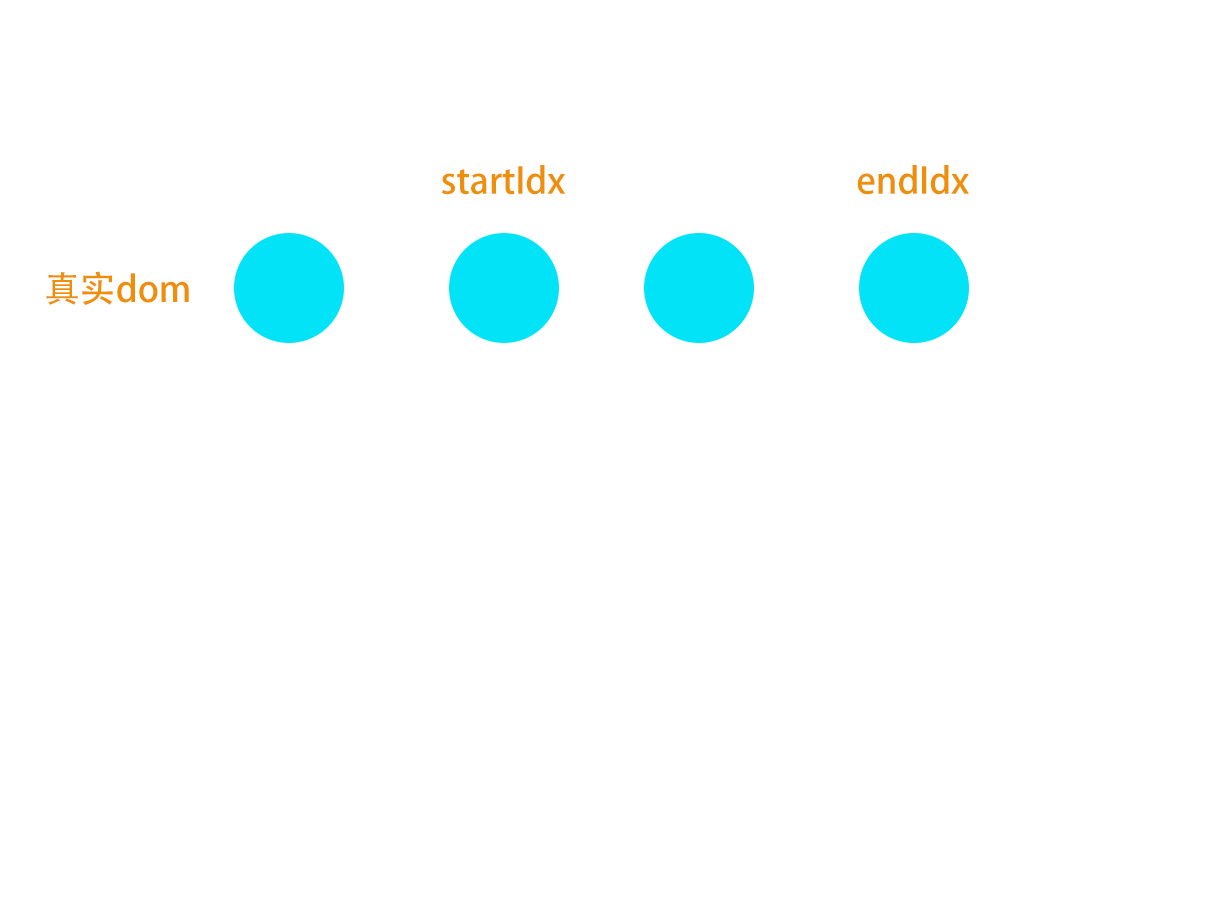
<style>
.page{position:relative;width:1215px;height:920px;background:#ffffff}
.page>*{position:absolute;margin:0}
.t1{font:36px "AdobeHeitiStd-Regular";color:#ee8f07}
</style>
<div class="page">
<p class="t1" style="left:442px;top:165px;width:124px;height:30px">startIdx</p>
<p class="t1" style="left:857px;top:165px;width:112px;height:30px">endIdx</p>
<p class="t1" style="left:46px;top:271px;width:143px;height:34px">真实dom</p>
</div>
